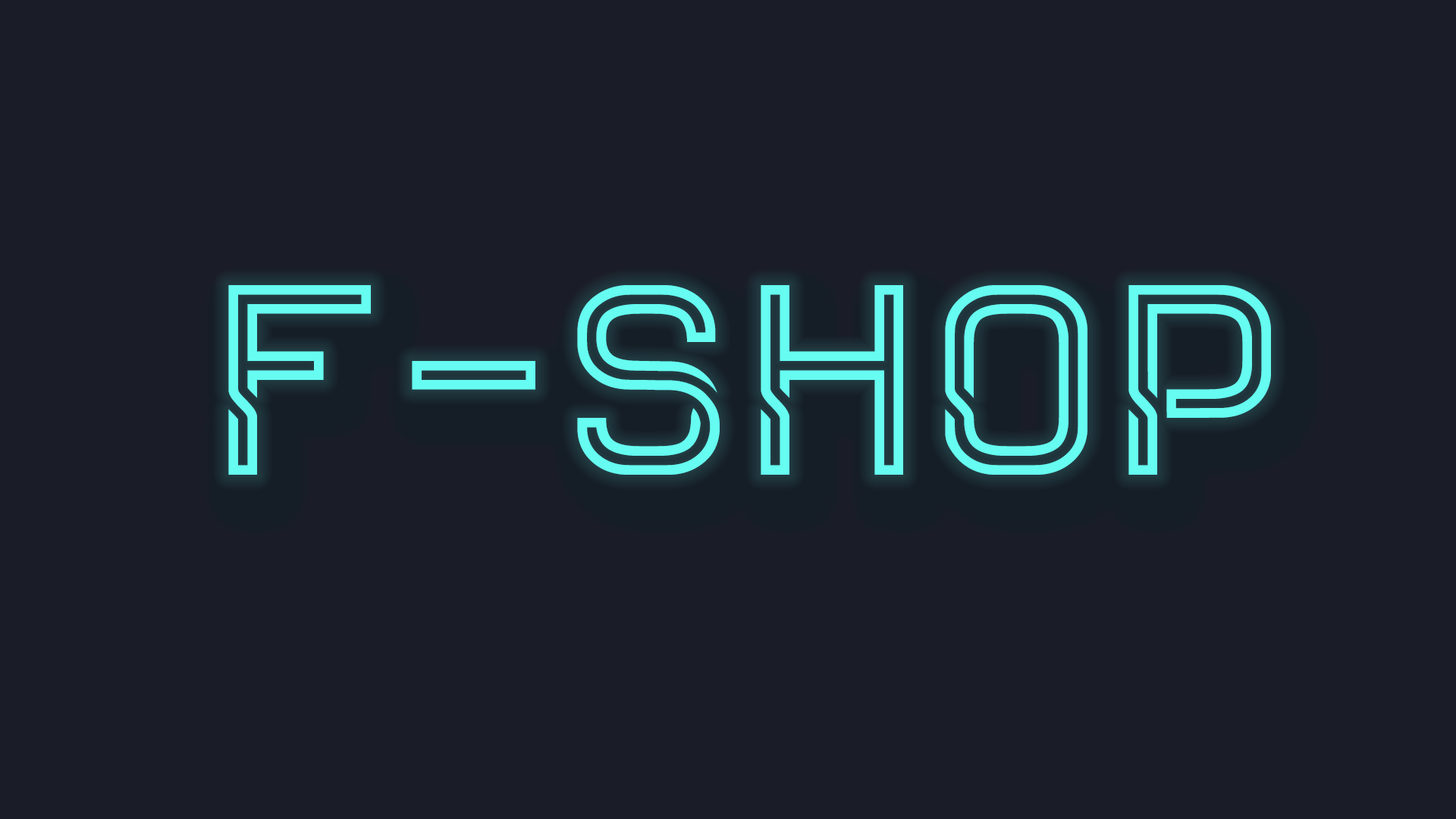
<style>
.page{position:relative;width:1456px;height:819px;background:#1a1d27}
.page>*{position:absolute;margin:0}
.t1{font:227.5px "Sportrop-Regular";letter-spacing:0.1em;color:#66fcf1}
</style>
<div class="page">
<p class="t1" style="left:228px;top:285px;width:1043px;height:190px">F-SHOP</p>
</div>
